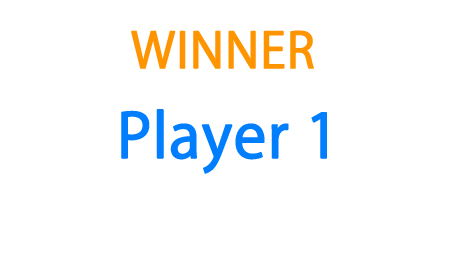
<style>
.page{position:relative;width:454px;height:255px;background:#ffffff}
.page>*{position:absolute;margin:0}
.t1{font:48px "KozGoPr6N-Regular";color:#fe9500;font-weight:bold}
.t2{font:60px "KozGoPr6N-Regular";color:#007efe;font-weight:bold}
</style>
<div class="page">
<p class="t1" style="left:131px;top:30px;width:183px;height:39px">WINNER</p>
<p class="t2" style="left:121px;top:109px;width:206px;height:65px">Player 1</p>
</div>
